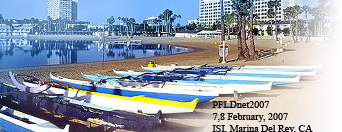
<style>
.page{position:relative;width:342px;height:132px}
.page>*{position:absolute;margin:0}
.t1{font:10px "TimesNewRomanPSMT";color:#000000}
</style>
<div class="page">
<p class="t1" style="left:212px;top:101px;width:101px;height:33px">PFLDnet2007<br>7,8 February, 2007<br>ISI, Marina Del Rey, CA</p>
</div>
